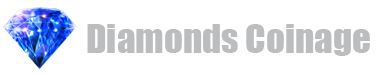
<style>
.page{position:relative;width:384px;height:74px;background:#ffffff}
.page>*{position:absolute;margin:0}
.t1{font:37px "Impact";color:#bcbdbf}
</style>
<div class="page">
<p class="t1" style="left:87px;top:24px;width:283px;height:32px">Diamonds Coinage</p>
</div>
